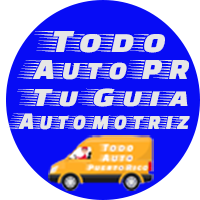
<style>
.page{position:relative;width:200px;height:200px;background:#070cf5}
.page>*{position:absolute;margin:0}
.t1{font:33.6px "FasterOne-Regular";color:#e6e6e6;scale:1.26 1}
.t2{font:30.4px "FasterOne-Regular";color:#e6e6e6;scale:1.14 1}
.t3{font:27.2px "FasterOne-Regular";color:#e6e6e6;scale:1.38 1}
.t4{font:24.7px "FasterOne-Regular";color:#e6e6e6}
</style>
<div class="page">
<p class="t1" style="left:34px;top:31px;width:131px;height:22px">Todo</p>
<p class="t2" style="left:17px;top:60px;width:172px;height:20px">Auto PR</p>
<p class="t3" style="left:17px;top:88px;width:171px;height:19px">Tu Guia</p>
<p class="t4" style="left:7px;top:113px;width:183px;height:17px">Automotriz</p>
</div>
